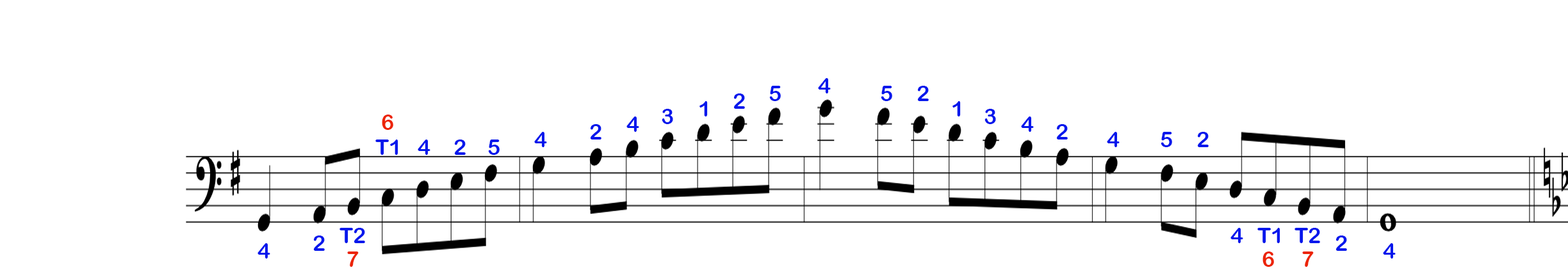
<style>
.page{position:relative;width:1568px;height:279px;background:#ffffff}
.page>*{position:absolute;margin:0}
.t1{font:21.8px "ArialRoundedMTBold";color:#0417ec}
.t2{font:21.8px "ArialRoundedMTBold";color:#ec2404}
</style>
<div class="page">
<p class="t1" style="left:769px;top:86px;width:12px;height:15px">5</p>
<p class="t1" style="left:818px;top:78px;width:13px;height:16px">4</p>
<p class="t1" style="left:881px;top:86px;width:11px;height:15px">5</p>
<p class="t1" style="left:917px;top:86px;width:12px;height:15px">2</p>
<p class="t1" style="left:699px;top:101px;width:9px;height:16px">1</p>
<p class="t1" style="left:733px;top:94px;width:12px;height:15px">2</p>
<p class="t1" style="left:952px;top:101px;width:9px;height:16px">1</p>
<p class="t1" style="left:662px;top:109px;width:11px;height:15px">3</p>
<p class="t1" style="left:984px;top:109px;width:12px;height:15px">3</p>
<p class="t2" style="left:382px;top:115px;width:11px;height:15px">6</p>
<p class="t1" style="left:590px;top:124px;width:11px;height:16px">2</p>
<p class="t1" style="left:626px;top:117px;width:13px;height:15px">4</p>
<p class="t1" style="left:1021px;top:117px;width:13px;height:15px">4</p>
<p class="t1" style="left:1056px;top:124px;width:12px;height:16px">2</p>
<p class="t1" style="left:534px;top:132px;width:13px;height:15px">4</p>
<p class="t1" style="left:1107px;top:132px;width:13px;height:15px">4</p>
<p class="t1" style="left:1161px;top:132px;width:11px;height:15px">5</p>
<p class="t1" style="left:1197px;top:132px;width:12px;height:15px">2</p>
<p class="t1" style="left:375px;top:140px;width:23px;height:15px">T1</p>
<p class="t1" style="left:418px;top:140px;width:12px;height:15px">4</p>
<p class="t1" style="left:454px;top:140px;width:12px;height:15px">2</p>
<p class="t1" style="left:488px;top:140px;width:12px;height:15px">5</p>
<p class="t1" style="left:339px;top:228px;width:26px;height:15px">T2</p>
<p class="t1" style="left:1230px;top:228px;width:13px;height:15px">4</p>
<p class="t1" style="left:1257px;top:228px;width:23px;height:15px">T1</p>
<p class="t1" style="left:1294px;top:228px;width:26px;height:15px">T2</p>
<p class="t1" style="left:257px;top:243px;width:13px;height:16px">4</p>
<p class="t1" style="left:313px;top:236px;width:12px;height:15px">2</p>
<p class="t1" style="left:1335px;top:236px;width:12px;height:15px">2</p>
<p class="t1" style="left:1383px;top:243px;width:13px;height:16px">4</p>
<p class="t2" style="left:347px;top:252px;width:12px;height:15px">7</p>
<p class="t2" style="left:1262px;top:252px;width:12px;height:15px">6</p>
<p class="t2" style="left:1302px;top:252px;width:12px;height:15px">7</p>
</div>
